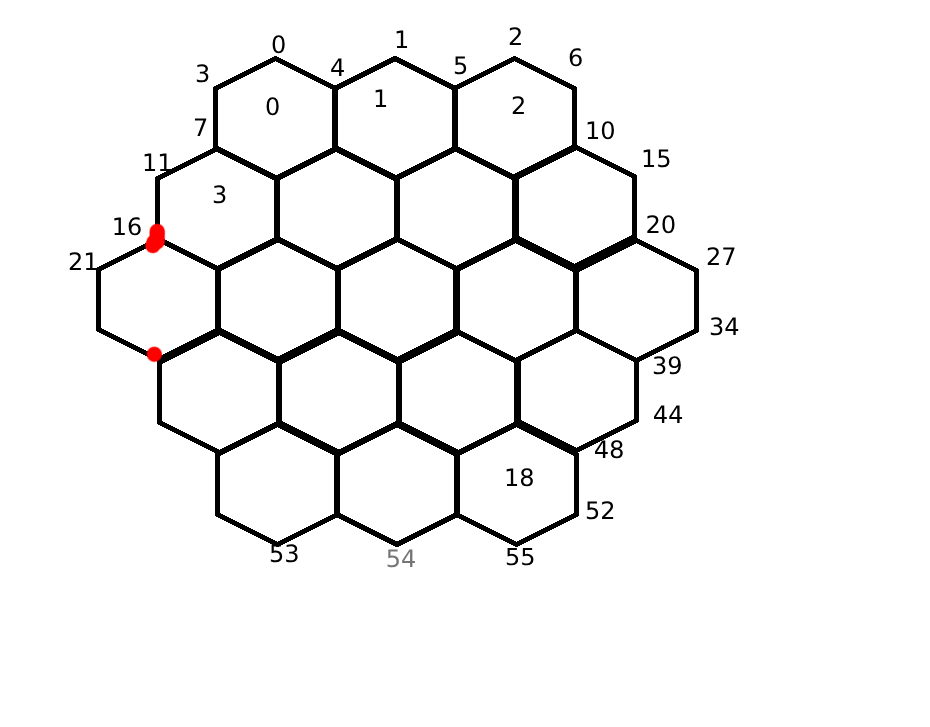
<style>
.page{position:relative;width:930px;height:727px;background:#ffffff}
.page>*{position:absolute;margin:0}
.t1{font:24px "DejaVuSans";color:#000000}
.t2{font:24px "DejaVuSans"}
.t3{font:24px "DejaVuSans";color:#757575}
.t4{font:23.2px "DejaVuSans";color:#000000;scale:1.04 1}
</style>
<div class="page">
<p class="t1" style="left:397px;top:30px;width:12px;height:18px">1</p>
<p class="t1" style="left:509px;top:27px;width:12px;height:18px">2</p>
<p class="t2" style="left:273px;top:35px;width:13px;height:19px">0</p>
<p class="t1" style="left:569px;top:48px;width:13px;height:19px">6</p>
<p class="t1" style="left:197px;top:64px;width:13px;height:19px">3</p>
<p class="t1" style="left:332px;top:58px;width:13px;height:18px">4</p>
<p class="t1" style="left:454px;top:56px;width:13px;height:19px">5</p>
<p class="t1" style="left:376px;top:89px;width:12px;height:18px">1</p>
<p class="t2" style="left:267px;top:97px;width:13px;height:19px">0</p>
<p class="t1" style="left:513px;top:96px;width:12px;height:18px">2</p>
<p class="t1" style="left:194px;top:118px;width:13px;height:18px">7</p>
<p class="t1" style="left:587px;top:121px;width:27px;height:19px">10</p>
<p class="t1" style="left:643px;top:149px;width:27px;height:19px">15</p>
<p class="t1" style="left:144px;top:153px;width:27px;height:18px">11</p>
<p class="t1" style="left:214px;top:185px;width:13px;height:19px">3</p>
<p class="t1" style="left:114px;top:217px;width:27px;height:19px">16</p>
<p class="t1" style="left:647px;top:215px;width:28px;height:19px">20</p>
<p class="t1" style="left:69px;top:252px;width:28px;height:18px">21</p>
<p class="t1" style="left:707px;top:247px;width:28px;height:18px">27</p>
<p class="t1" style="left:710px;top:317px;width:29px;height:19px">34</p>
<p class="t1" style="left:653px;top:356px;width:28px;height:19px">39</p>
<p class="t1" style="left:654px;top:405px;width:29px;height:18px">44</p>
<p class="t2" style="left:507px;top:468px;width:27px;height:19px">18</p>
<p class="t1" style="left:586px;top:501px;width:28px;height:19px">52</p>
<p class="t1" style="left:270px;top:544px;width:28px;height:19px">53</p>
<p class="t3" style="left:387px;top:549px;width:28px;height:19px">54</p>
<p class="t4" style="left:507px;top:548px;width:28px;height:18px">55</p>
</div>
